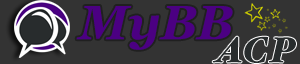
<style>
.page{position:relative;width:300px;height:64px;background:#333333}
.page>*{position:absolute;margin:0}
.t1{font:48px "Georgia-BoldItalic";color:#4b0082}
</style>
<div class="page">
<p class="t1" style="left:76px;top:6px;width:157px;height:44px">MyBB</p>
</div>
